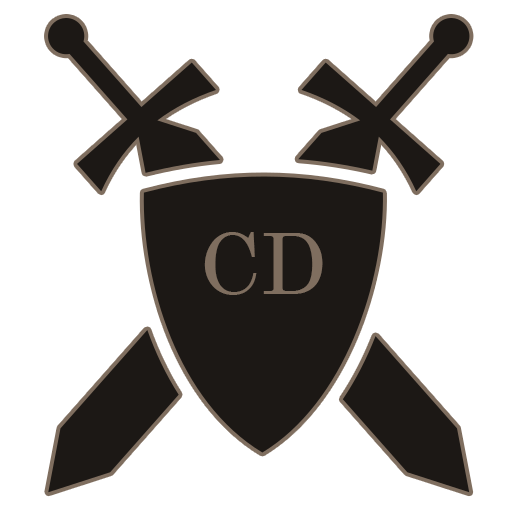
<style>
.page{position:relative;width:512px;height:512px;background:#ffffff}
.page>*{position:absolute;margin:0}
.t1{font:85px "Century";color:#7f6e5f}
</style>
<div class="page">
<p class="t1" style="left:204px;top:232px;width:119px;height:63px">CD</p>
</div>
